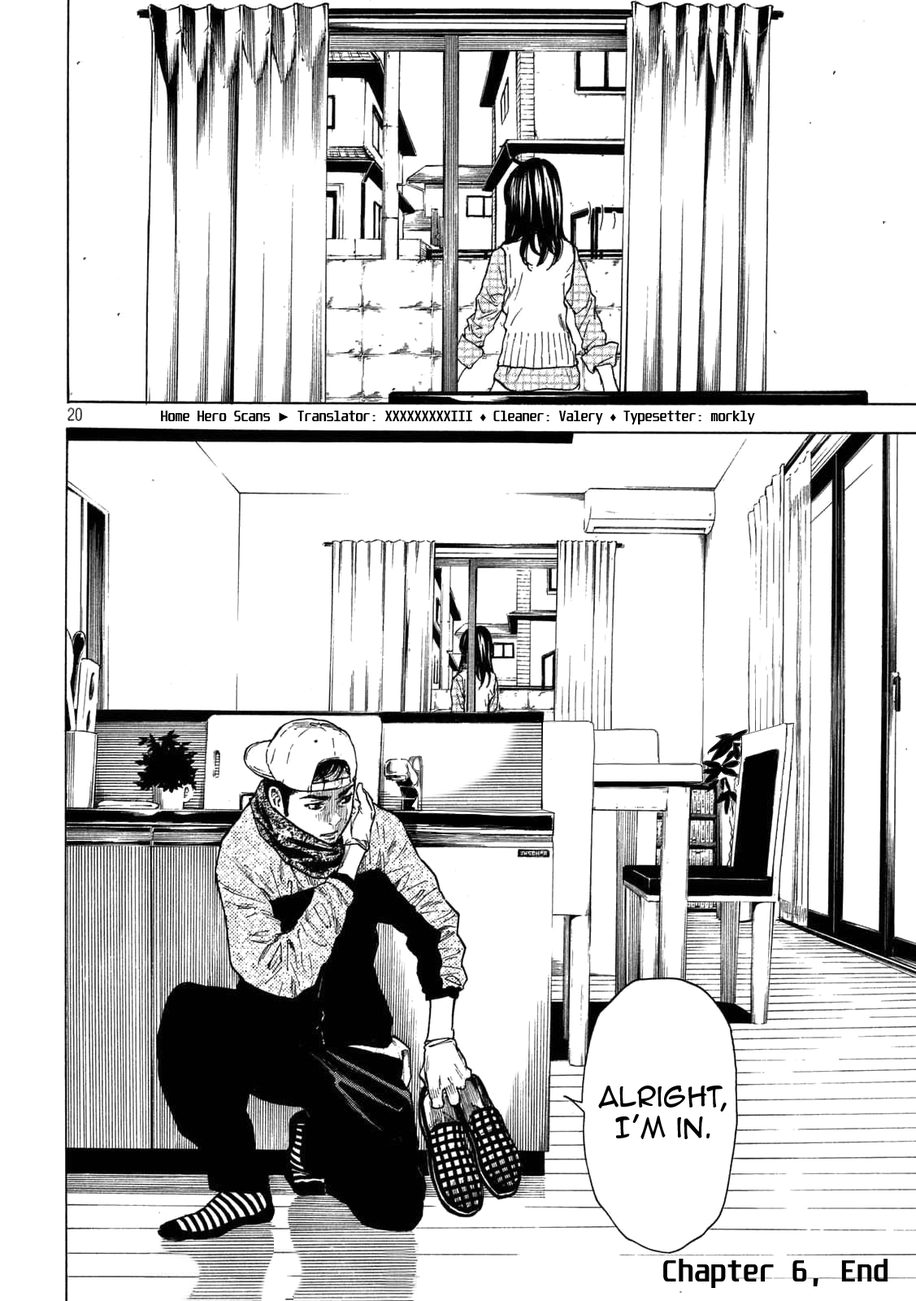
<style>
.page{position:relative;width:916px;height:1301px;background:#ffffff}
.page>*{position:absolute;margin:0}
.t1{font:11.9px "Unispace-Bold";color:#000000}
.t2{font:11.9px "ArialMT";color:#000000}
.t3{font:26px "AnimeAce2.0BB";color:#000000}
.t4{font:26px "Unispace-Bold";color:#000000}
</style>
<div class="page">
<p class="t1" style="left:161px;top:411px;width:594px;height:13px">Home Hero Scans <span class="t2">►</span> Translator: XXXXXXXXXIII <span class="t2">♦</span> Cleaner: Valery <span class="t2">♦</span> Typesetter: morkly</p>
<p class="t3" style="left:599px;top:1086px;width:128px;height:53px;text-align:center">Alright, I’m in.</p>
<p class="t4" style="left:664px;top:1259px;width:224px;height:29px">Chapter 6, End</p>
</div>
